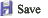
<style>
.page{position:relative;width:48px;height:18px;background:#ffffff}
.page>*{position:absolute;margin:0}
.t1{font:12px "TimesNewRomanPSMT";letter-spacing:-0.005em;color:#31372c}
</style>
<div class="page">
<p class="t1" style="left:18px;top:4px;width:23px;height:10px">Save</p>
<p class="t1" style="left:18px;top:4px;width:23px;height:10px">Save</p>
</div>
